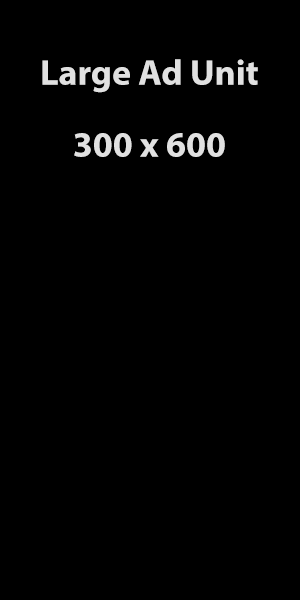
<style>
.page{position:relative;width:300px;height:600px;background:#000000}
.page>*{position:absolute;margin:0}
.t1{font:36px/72px "MyriadPro-Bold";color:#e1e1e1}
</style>
<div class="page">
<p class="t1" style="left:42px;top:59px;width:216px;height:98px;text-align:center">Large Ad Unit<br>300 x 600</p>
</div>
